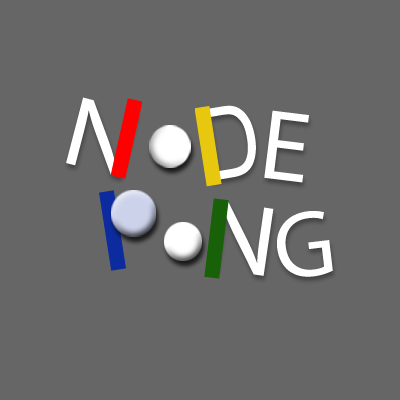
<style>
.page{position:relative;width:400px;height:400px;background:#666666}
.page>*{position:absolute;margin:0}
.t1{font:100px "MyriadPro-Regular";color:#ffffff;scale:1.11 1}
.t2{font:100px "ArialMT";color:#ffffff;scale:0.83 1}
.t3{font:100px "MyriadPro-Regular";color:#ffffff}
.t4{font:95px "Myriad-Roman";color:#ffffff}
</style>
<div class="page">
<p class="t1" style="left:66px;top:97px;width:72px;height:80px;rotate:15deg">N</p>
<p class="t2" style="left:200px;top:105px;width:56px;height:76px;rotate:-10deg">D</p>
<p class="t3" style="left:264px;top:110px;width:45px;height:73px;rotate:7deg">E</p>
<p class="t1" style="left:208px;top:200px;width:66px;height:76px;rotate:8deg">N</p>
<p class="t4" style="left:277px;top:211px;width:56px;height:66px;rotate:-7deg">G</p>
</div>
